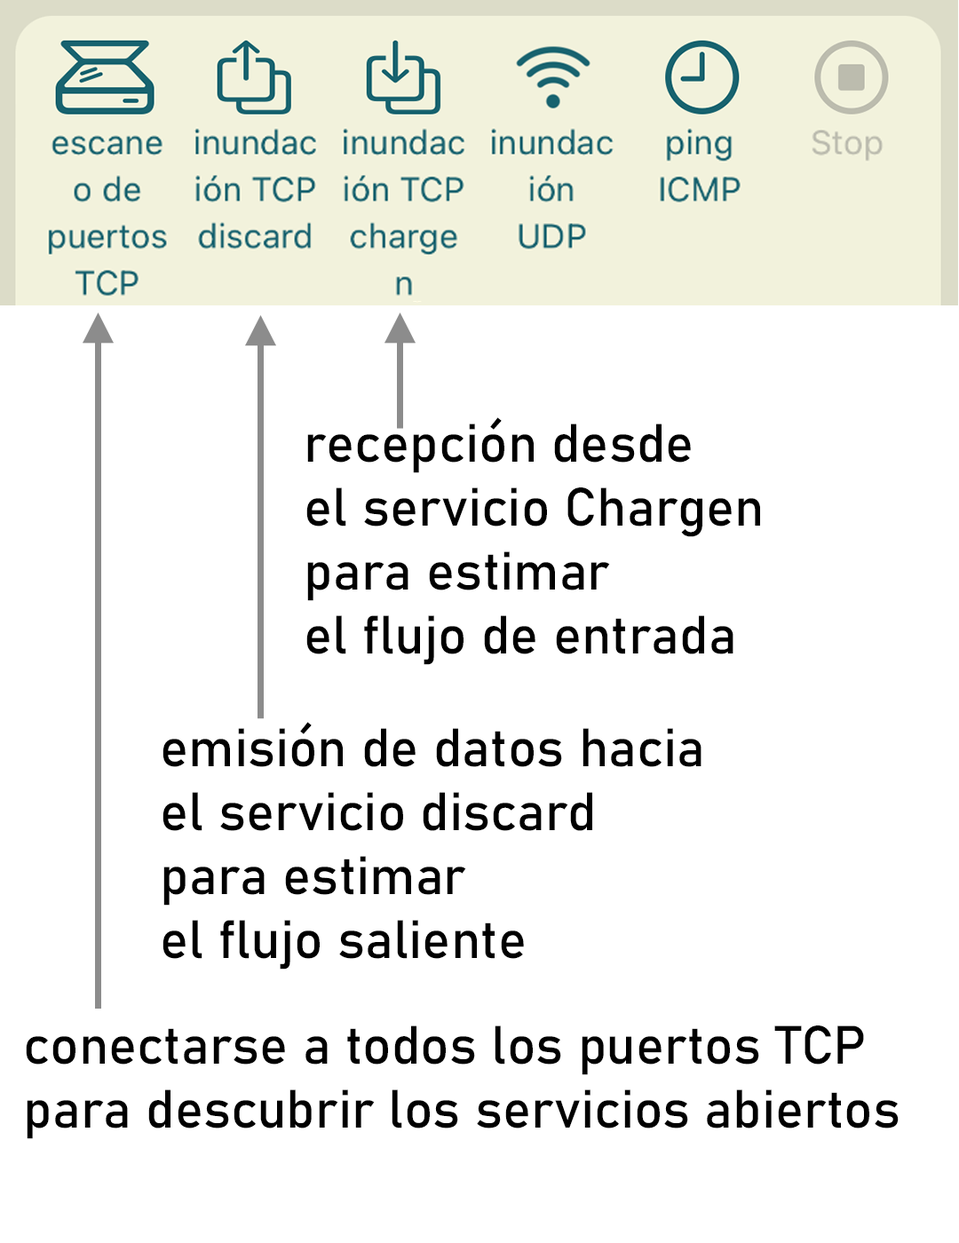
<style>
.page{position:relative;width:959px;height:1243px;background:#ffffff}
.page>*{position:absolute;margin:0}
.t1{font:53.3px "Bahnschrift";color:#000000}
</style>
<div class="page">
<p class="t1" style="left:306px;top:417px;width:454px;height:248px">recepción desde<br>el servicio Chargen<br>para estimar<br>el flujo de entrada</p>
<p class="t1" style="left:163px;top:722px;width:539px;height:248px">emisión de datos hacia<br>el servicio discard<br>para estimar<br>el flujo saliente</p>
<p class="t1" style="left:26px;top:1026px;width:873px;height:113px">conectarse a todos los puertos TCP<br>para descubrir los servicios abiertos</p>
</div>
